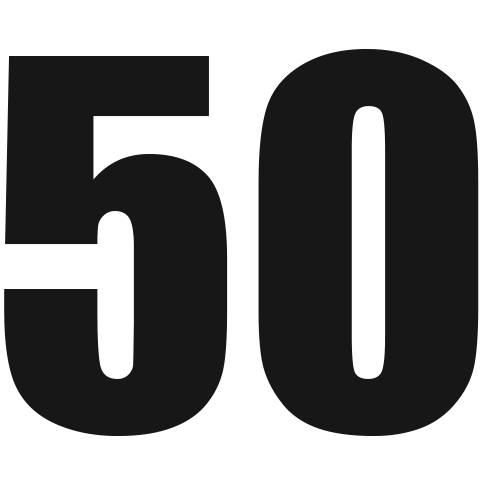
<style>
.page{position:relative;width:480px;height:480px;background:#171717}
.page>*{position:absolute;margin:0}
.t1{font:472.3px "Impact";color:#171717}
</style>
<div class="page">
<p class="t1" style="left:4px;top:49px;width:475px;height:387px">50</p>
</div>
